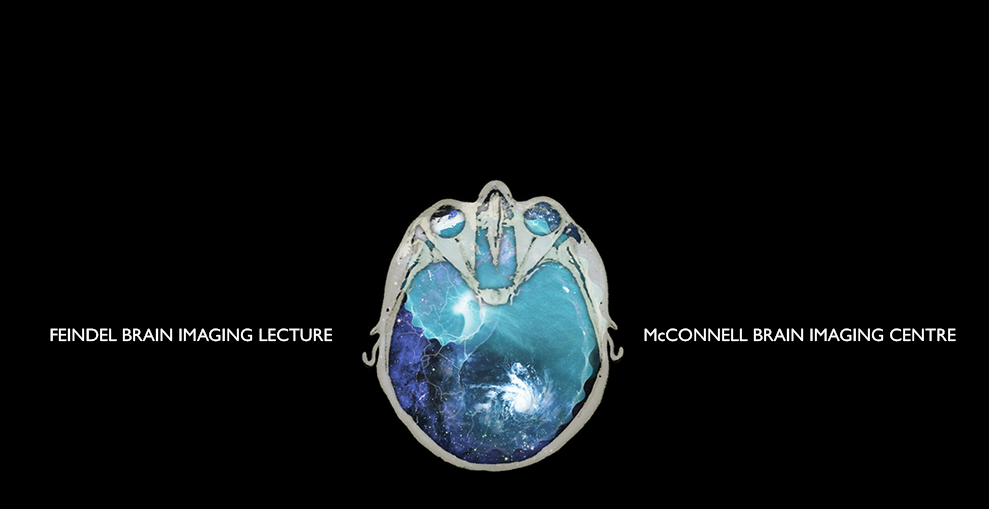
<style>
.page{position:relative;width:989px;height:509px;background:#000000}
.page>*{position:absolute;margin:0}
.t1{font:18px "GillSans";color:#ffffff}
</style>
<div class="page">
<p class="t1" style="left:50px;top:328px;width:283px;height:14px">FEINDEL BRAIN IMAGING LECTURE</p>
<p class="t1" style="left:644px;top:328px;width:312px;height:14px">McCONNELL BRAIN IMAGING CENTRE</p>
</div>
